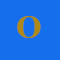
<style>
.page{position:relative;width:60px;height:60px;background:#156fed}
.page>*{position:absolute;margin:0}
.t1{font:33.3px "TimesNewRomanPS-BoldMT";color:#af8916}
</style>
<div class="page">
<p class="t1" style="left:17px;top:16px;width:24px;height:22px">O</p>
</div>
